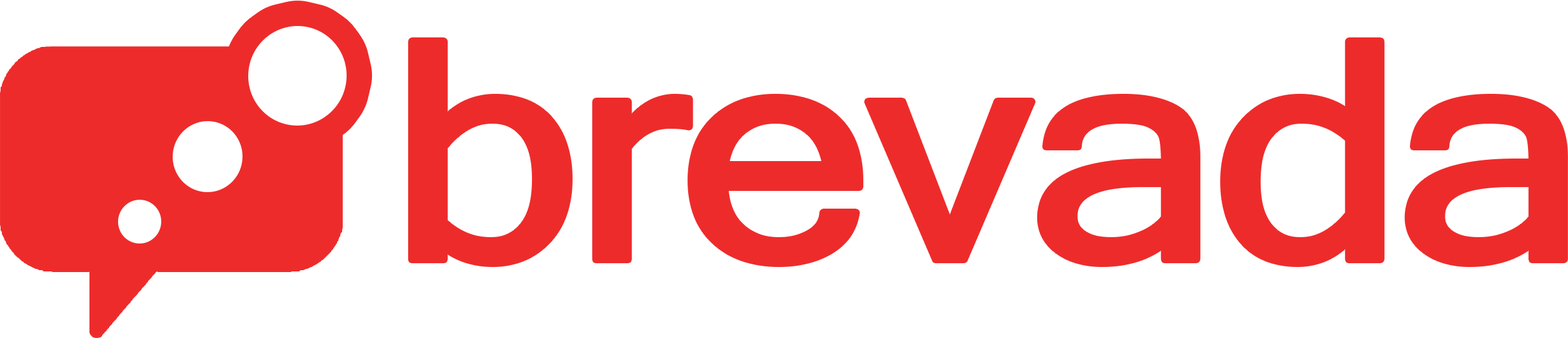
<style>
.page{position:relative;width:1568px;height:338px;background:#ffffff}
.page>*{position:absolute;margin:0}
.t1{font:305.1px "MicrosoftSansSerif";letter-spacing:-0.025em;color:#ee2b2b;scale:1.13 1}
</style>
<div class="page">
<p class="t1" style="left:411px;top:41px;width:1153px;height:222px">brevada</p>
</div>
